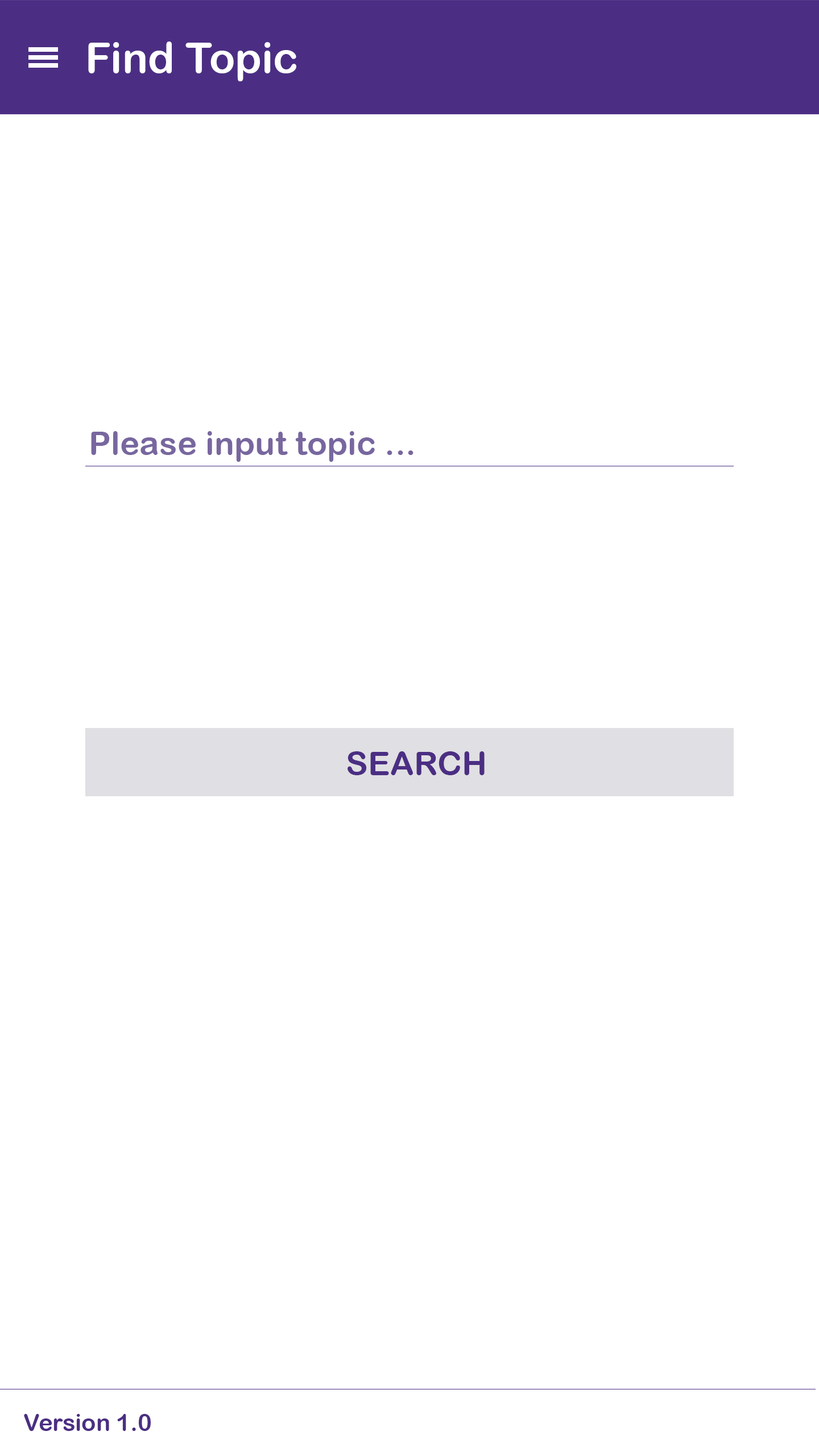
<style>
.page{position:relative;width:819px;height:1456px;background:#ffffff}
.page>*{position:absolute;margin:0}
.t1{font:42.7px "ArialRoundedMTBold";color:#ffffff}
.t2{font:33.2px "ArialRoundedMTBold";color:#78679f}
.t3{font:33.2px "ArialRoundedMTBold";color:#4b2e83}
.t4{font:23.7px "ArialRoundedMTBold";color:#4b2e83}
</style>
<div class="page">
<p class="t1" style="left:88px;top:42px;width:208px;height:39px">Find Topic</p>
<p class="t2" style="left:91px;top:431px;width:322px;height:31px">Please input topic ...</p>
<p class="t3" style="left:348px;top:751px;width:137px;height:24px">SEARCH</p>
<p class="t4" style="left:24px;top:1414px;width:127px;height:17px">Version 1.0</p>
</div>
